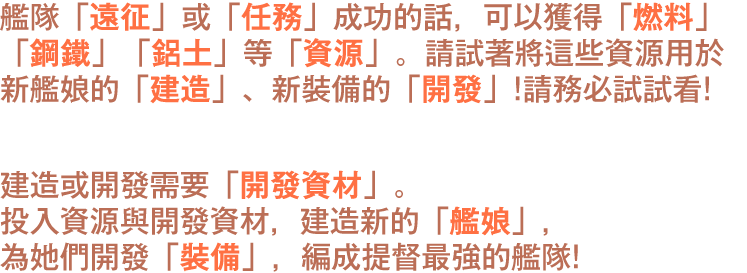
<style>
.page{position:relative;width:747px;height:273px;background:#ffffff}
.page>*{position:absolute;margin:0}
.t1{font:30px/36px "GothicMB101Pr6N-Medium";color:#bb6d56}
.t2{font:30px/36px "GothicMB101Pr6N-Medium";color:#ff7043;font-weight:bold}
</style>
<div class="page">
<p class="t1" style="left:0px;top:2px;width:724px;height:270px">艦隊「<span class="t2">遠征</span>」或「<span class="t2">任務</span>」成功的話，可以獲得「<span class="t2">燃料</span>」<br>「<span class="t2">鋼鐵</span>」「<span class="t2">鋁土</span>」等「<span class="t2">資源</span>」。請試著將這些資源用於<br>新艦娘的「<span class="t2">建造</span>」、新裝備的「<span class="t2">開發</span>」!請務必試試看!<br><br><br>建造或開發需要「<span class="t2">開發資材</span>」。<br>投入資源與開發資材，建造新的「<span class="t2">艦娘</span>」，<br>為她們開發「<span class="t2">裝備</span>」，編成提督最強的艦隊!</p>
</div>
